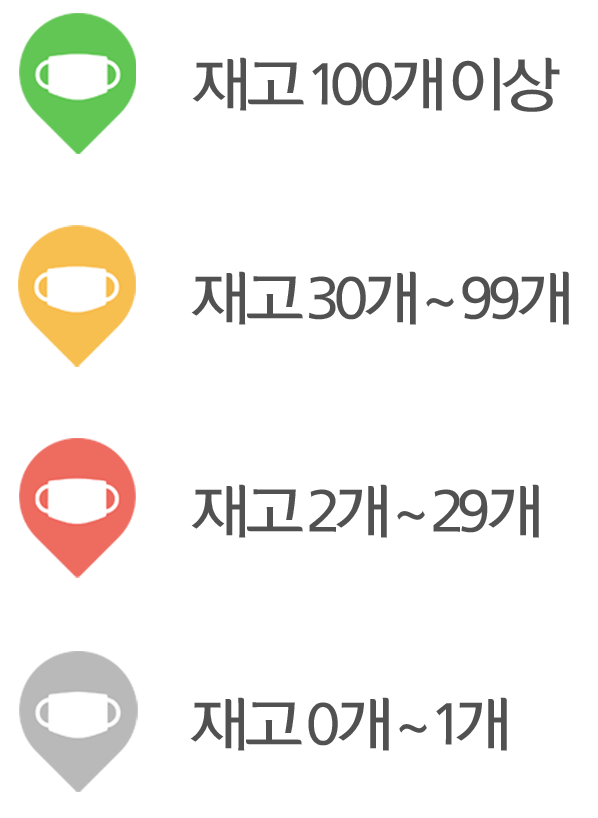
<style>
.page{position:relative;width:598px;height:818px;background:#ffffff}
.page>*{position:absolute;margin:0}
.t1{font:60px "NYJGothicM";letter-spacing:-0.05em;color:#515151}
</style>
<div class="page">
<p class="t1" style="left:192px;top:57px;width:368px;height:55px">재고 100개 이상</p>
<p class="t1" style="left:191px;top:271px;width:378px;height:54px">재고 30개 ~ 99개</p>
<p class="t1" style="left:191px;top:484px;width:348px;height:54px">재고 2개 ~ 29개</p>
<p class="t1" style="left:190px;top:697px;width:317px;height:54px">재고 0개 ~ 1개</p>
</div>
